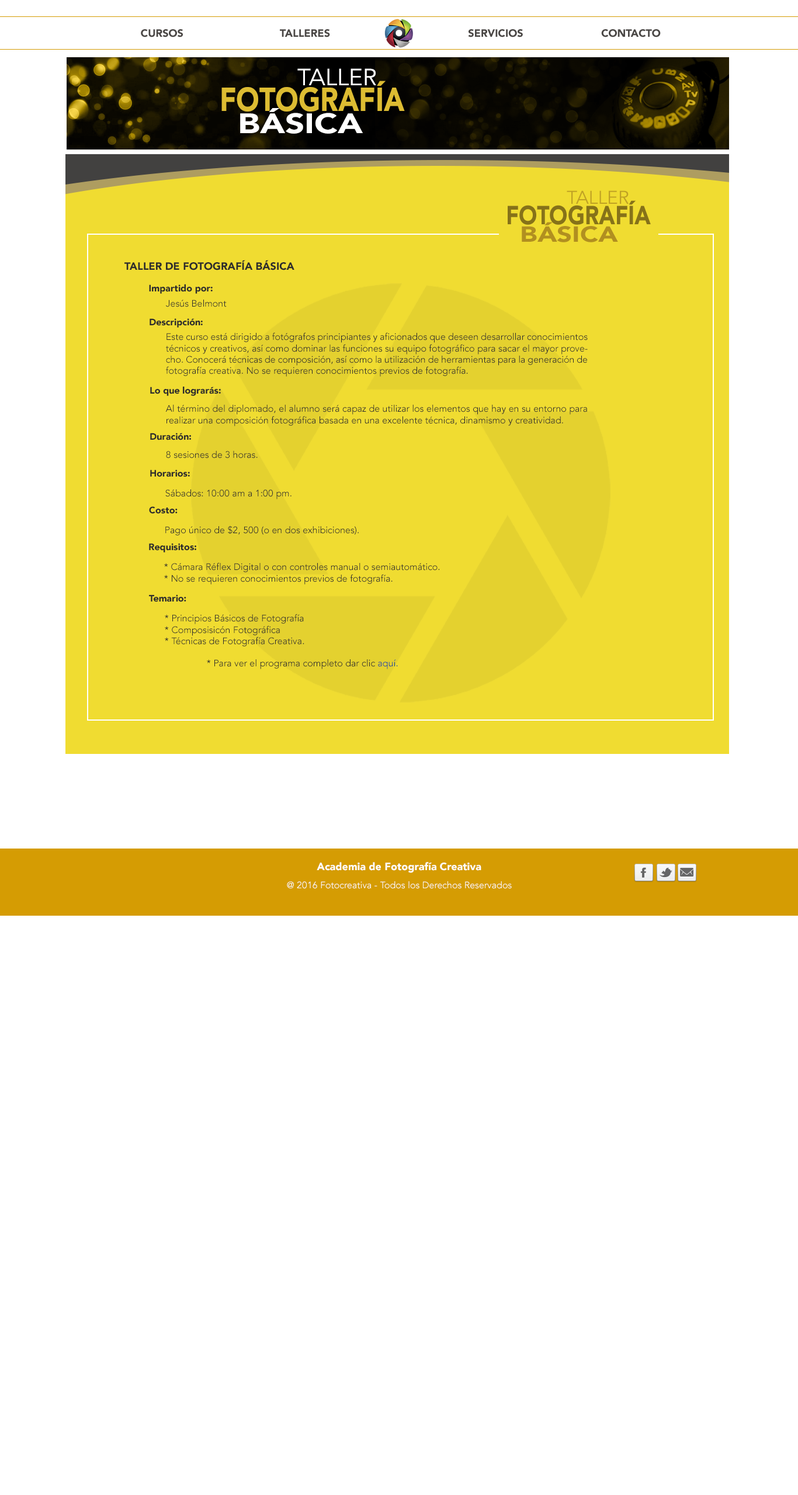
<style>
.page{position:relative;width:798px;height:1495px;background:#ffffff}
.page>*{position:absolute;margin:0}
.t1{font:10.5px "Avenir-Black";color:#4a4745}
.t2{font:10.5px "Avenir-Black";color:#2d2c2c}
.t3{font:9.3px "Avenir-Black";color:#2d2c2c}
.t4{font:9.3px "Avenir-Book";color:#2d2c2c}
.t5{font:9.3px "Avenir-Book";color:#0a409a}
.t6{font:10.5px "Avenir-Black";color:#ffffff}
.t7{font:9.3px "Avenir-Book";color:#ffffff}
</style>
<div class="page">
<p class="t1" style="left:141px;top:29px;width:42px;height:8px">CURSOS</p>
<p class="t1" style="left:280px;top:29px;width:50px;height:8px">TALLERES</p>
<p class="t1" style="left:468px;top:29px;width:55px;height:8px">SERVICIOS</p>
<p class="t1" style="left:601px;top:29px;width:59px;height:8px">CONTACTO</p>
<p class="t2" style="left:124px;top:260px;width:170px;height:10px">TALLER DE FOTOGRAFÍA BÁSICA</p>
<p class="t3" style="left:149px;top:284px;width:64px;height:10px">Impartido por:</p>
<p class="t4" style="left:166px;top:300px;width:61px;height:7px">Jesús Belmont</p>
<p class="t3" style="left:149px;top:318px;width:54px;height:10px">Descripción:</p>
<p class="t4" style="left:166px;top:332px;width:421px;height:45px;text-align:justify">Este curso está dirigido a fotógrafos principiantes y aficionados que deseen desarrollar conocimientos técnicos y creativos, así como dominar las funciones su equipo fotográfico para sacar el mayor provecho. Conocerá técnicas de composición, así como la utilización de herramientas para la generación de fotografía creativa. No se requieren conocimientos previos de fotografía.</p>
<p class="t3" style="left:150px;top:387px;width:71px;height:9px">Lo que lograrás:</p>
<p class="t4" style="left:165px;top:405px;width:422px;height:21px;text-align:justify">Al término del diplomado, el alumno será capaz de utilizar los elementos que hay en su entorno para realizar una composición fotográfica basada en una excelente técnica, dinamismo y creatividad.</p>
<p class="t3" style="left:150px;top:433px;width:41px;height:7px">Duración:</p>
<p class="t4" style="left:166px;top:451px;width:92px;height:7px">8 sesiones de 3 horas.</p>
<p class="t3" style="left:150px;top:469px;width:40px;height:8px">Horarios:</p>
<p class="t4" style="left:165px;top:489px;width:126px;height:10px">Sábados: 10:00 am a 1:00 pm.</p>
<p class="t3" style="left:149px;top:506px;width:29px;height:8px">Costo:</p>
<p class="t4" style="left:165px;top:526px;width:194px;height:9px">Pago único de $2, 500 (o en dos exhibiciones).</p>
<p class="t3" style="left:149px;top:543px;width:47px;height:9px">Requisitos:</p>
<p class="t4" style="left:164px;top:562px;width:276px;height:23px">* Cámara Réflex Digital o con controles manual o semiautomático.<br>* No se requieren conocimientos previos de fotografía.</p>
<p class="t3" style="left:149px;top:594px;width:37px;height:8px">Temario:</p>
<p class="t4" style="left:165px;top:614px;width:233px;height:55px">* Principios Básicos de Fotografía<br>* Composisicón Fotográfica<br>* Técnicas de Fotografía Creativa.<br><br>  * Para ver el programa completo dar clic <span class="t5">aquí.</span></p>
<p class="t6" style="left:316px;top:862px;width:165px;height:11px">Academia de Fotografía Creativa</p>
<p class="t7" style="left:287px;top:881px;width:225px;height:8px">@ 2016 Fotocreativa - Todos los Derechos Reservados</p>
</div>
